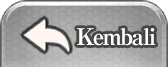
<style>
.page{position:relative;width:168px;height:67px}
.page>*{position:absolute;margin:0}
.t1{font:23px "RyuminPro-ExBold";letter-spacing:-0.08em;color:#ffffff}
</style>
<div class="page">
<p class="t1" style="left:77px;top:28px;width:79px;height:18px">Kembali</p>
</div>
